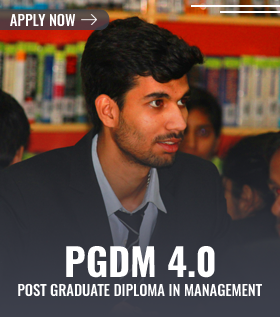
<style>
.page{position:relative;width:280px;height:317px}
.page>*{position:absolute;margin:0}
.t1{font:14.6px "Oswald-Medium";color:#ffffff;text-transform:uppercase}
.t2{font:38px "Oswald-Bold";color:#ffffff;text-transform:uppercase}
</style>
<div class="page">
<p class="t1" style="left:10px;top:13px;width:65px;height:14px">Apply Now</p>
<p class="t2" style="left:66px;top:246px;width:149px;height:32px">PGDM 4.0</p>
<p class="t1" style="left:18px;top:283px;width:244px;height:14px">Post Graduate Diploma in Management</p>
</div>
